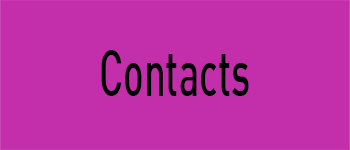
<style>
.page{position:relative;width:350px;height:150px;background:#c32faa}
.page>*{position:absolute;margin:0}
.t1{font:64.4px "DIN-Medium";color:#000000;scale:0.6 1}
</style>
<div class="page">
<p class="t1" style="left:101px;top:50px;width:148px;height:46px">Contacts</p>
</div>
